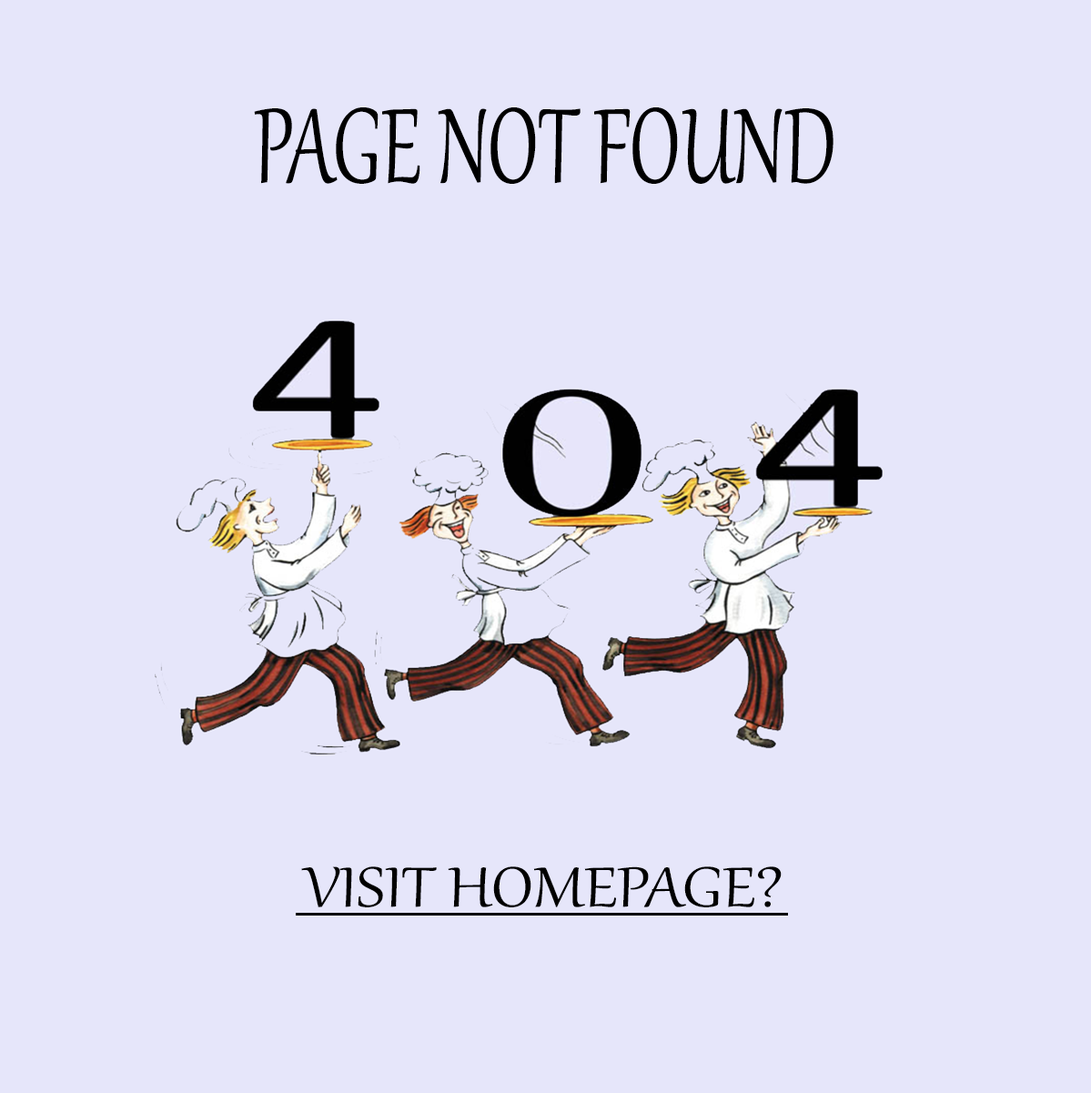
<style>
.page{position:relative;width:1091px;height:1093px;background:#e6e6fa}
.page>*{position:absolute;margin:0}
.t1{font:129.8px "Gabriola";color:#000000;scale:0.73 1}
.t2{font:69.4px "Gabriola";color:#000000;scale:1.14 1}
</style>
<div class="page">
<p class="t1" style="left:254px;top:107px;width:580px;height:77px">PAGE NOT FOUND</p>
<p class="t2" style="left:301px;top:866px;width:481px;height:41px">VISIT HOMEPAGE?</p>
</div>
